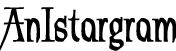
<style>
.page{position:relative;width:176px;height:51px;background:#ffffff}
.page>*{position:absolute;margin:0}
.t1{font:48.2px "PatrickNarrow2";color:#000000;font-weight:bold;scale:1.18 1}
</style>
<div class="page">
<p class="t1" style="left:0px;top:7px;width:177px;height:44px">AnIstargram</p>
</div>
